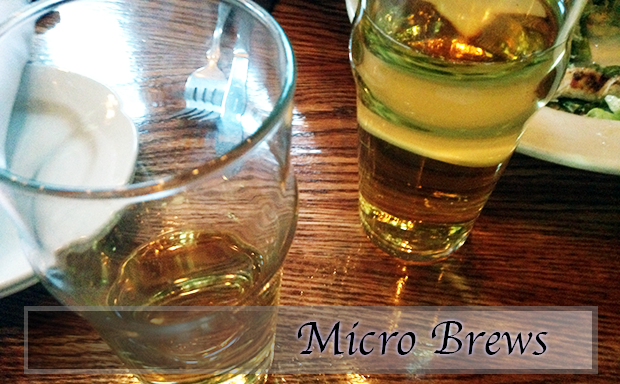
<style>
.page{position:relative;width:620px;height:384px}
.page>*{position:absolute;margin:0}
.t1{font:48px "Apple-Chancery";color:#000000}
</style>
<div class="page">
<p class="t1" style="left:297px;top:321px;width:251px;height:34px">Micro Brews</p>
</div>
